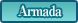
<style>
.page{position:relative;width:78px;height:23px;background:#115777}
.page>*{position:absolute;margin:0}
.t1{font:14px "RyuminPro-ExBold";letter-spacing:-0.08em;color:#ffffff;scale:0.9 1}
</style>
<div class="page">
<p class="t1" style="left:18px;top:5px;width:44px;height:12px">Armada</p>
</div>
